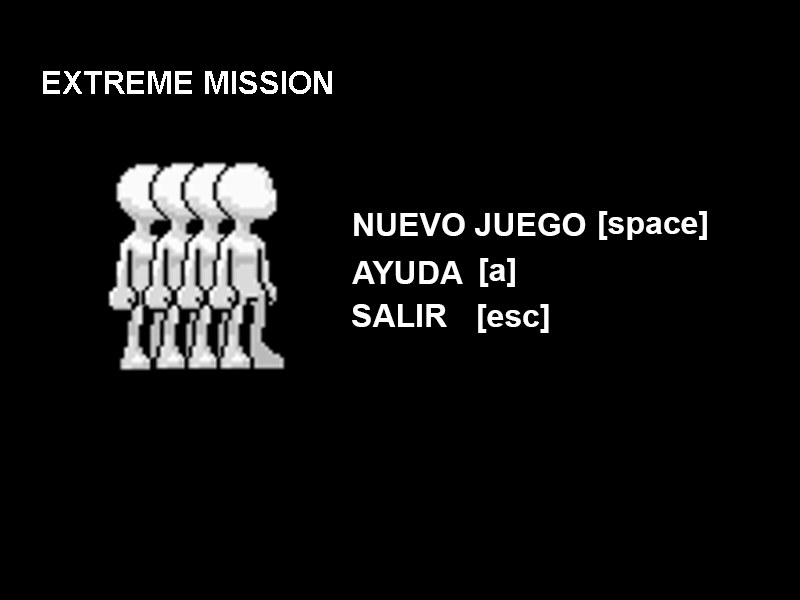
<style>
.page{position:relative;width:800px;height:600px;background:#000000}
.page>*{position:absolute;margin:0}
.t1{font:32px "Arial-BoldMT";color:#ffffff}
</style>
<div class="page">
<p class="t1" style="left:354px;top:213px;width:232px;height:23px">NUEVO JUEGO</p>
<p class="t1" style="left:599px;top:211px;width:108px;height:29px">[space]</p>
<p class="t1" style="left:352px;top:261px;width:111px;height:23px">AYUDA</p>
<p class="t1" style="left:480px;top:258px;width:35px;height:29px">[a]</p>
<p class="t1" style="left:352px;top:304px;width:95px;height:23px">SALIR</p>
<p class="t1" style="left:478px;top:304px;width:71px;height:29px">[esc]</p>
</div>
